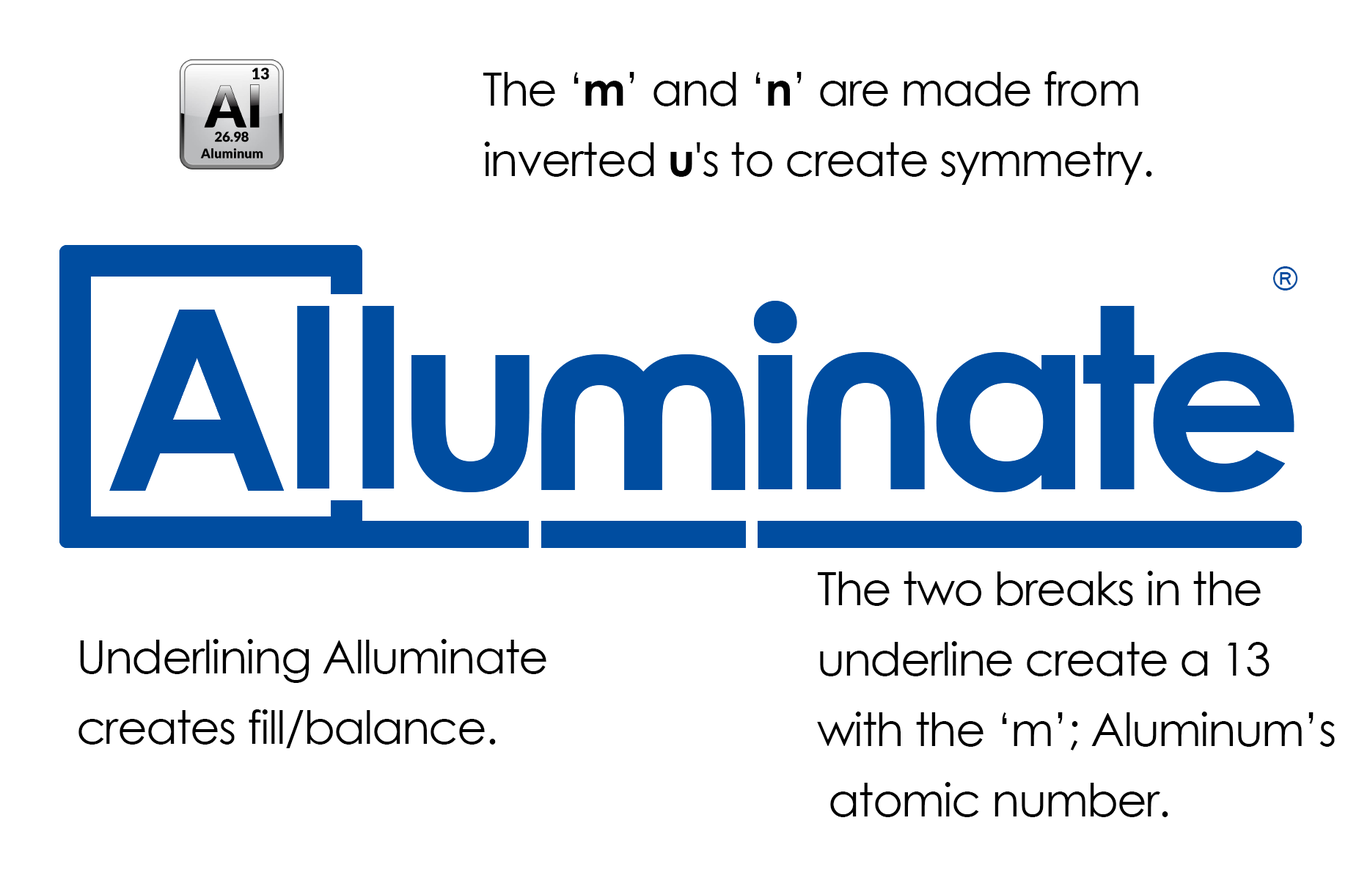
<style>
.page{position:relative;width:1370px;height:870px;background:#ffffff}
.page>*{position:absolute;margin:0}
.t1{font:45.9px/70.3px "CenturyGothic";letter-spacing:-0.025em;color:#000000}
.t2{font:45.9px/70.3px "CenturyGothic-Bold";letter-spacing:-0.025em;color:#000000}
.t3{font:35.2px "FranklinGothic-Book";letter-spacing:-0.025em;color:#004da0}
</style>
<div class="page">
<p class="t1" style="left:483px;top:71px;width:670px;height:114px">The ‘<span class="t2">m</span>’ and ‘<span class="t2">n</span>’ are made from<br>inverted <span class="t2">u</span>'s to create symmetry.</p>
<p class="t3" style="left:1274px;top:266px;width:25px;height:25px">®</p>
<p class="t1" style="left:817px;top:571px;width:518px;height:246px">The two breaks in the<br>underline create a 13<br>with the ‘m’; Aluminum’s<br> atomic number.</p>
<p class="t1" style="left:79px;top:639px;width:468px;height:109px">Underlining Alluminate<br>creates fill/balance.</p>
</div>
